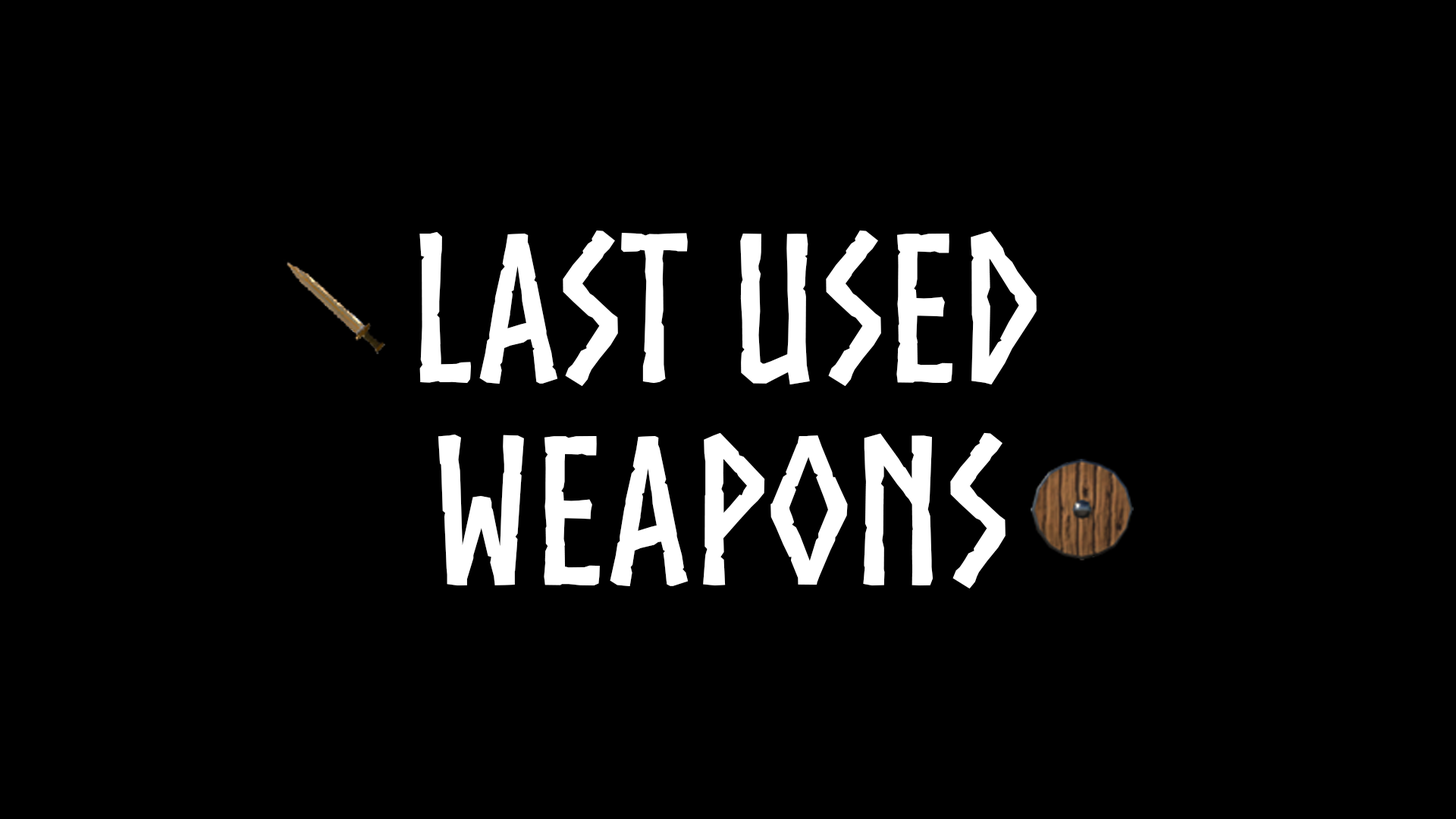
<style>
.page{position:relative;width:1456px;height:819px;background:#000000}
.page>*{position:absolute;margin:0}
.t1{font:202.2px/202.2px "Norse-Bold";color:#ffffff}
</style>
<div class="page">
<p class="t1" style="left:419px;top:230px;width:618px;height:358px;text-align:center">Last Used<br>Weapons</p>
</div>
